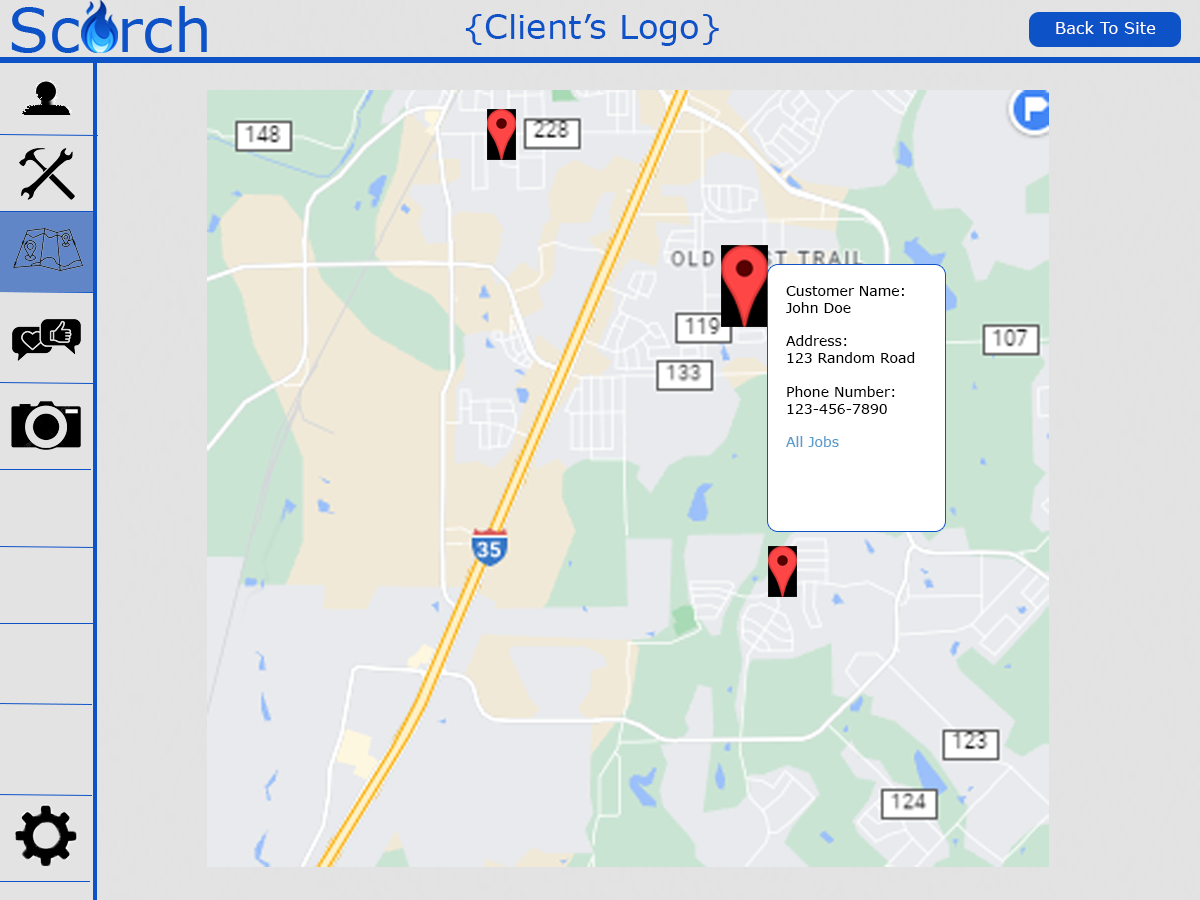
<style>
.page{position:relative;width:1200px;height:900px;background:#e3e3e3}
.page>*{position:absolute;margin:0}
.t1{font:33.4px "Verdana";color:#0d52c7}
.t2{font:14px "Verdana";color:#000000}
.t3{font:14px "Verdana";color:#5a9cce}
</style>
<div class="page">
<p class="t1" style="left:465px;top:14px;width:254px;height:32px">{Client’s Logo}</p>
<p class="t2" style="left:786px;top:286px;width:129px;height:161px">Customer Name:<br>John Doe<br><br>Address:<br>123 Random Road<br><br>Phone Number:<br>123-456-7890<br><br><span class="t3">All Jobs</span></p>
</div>
